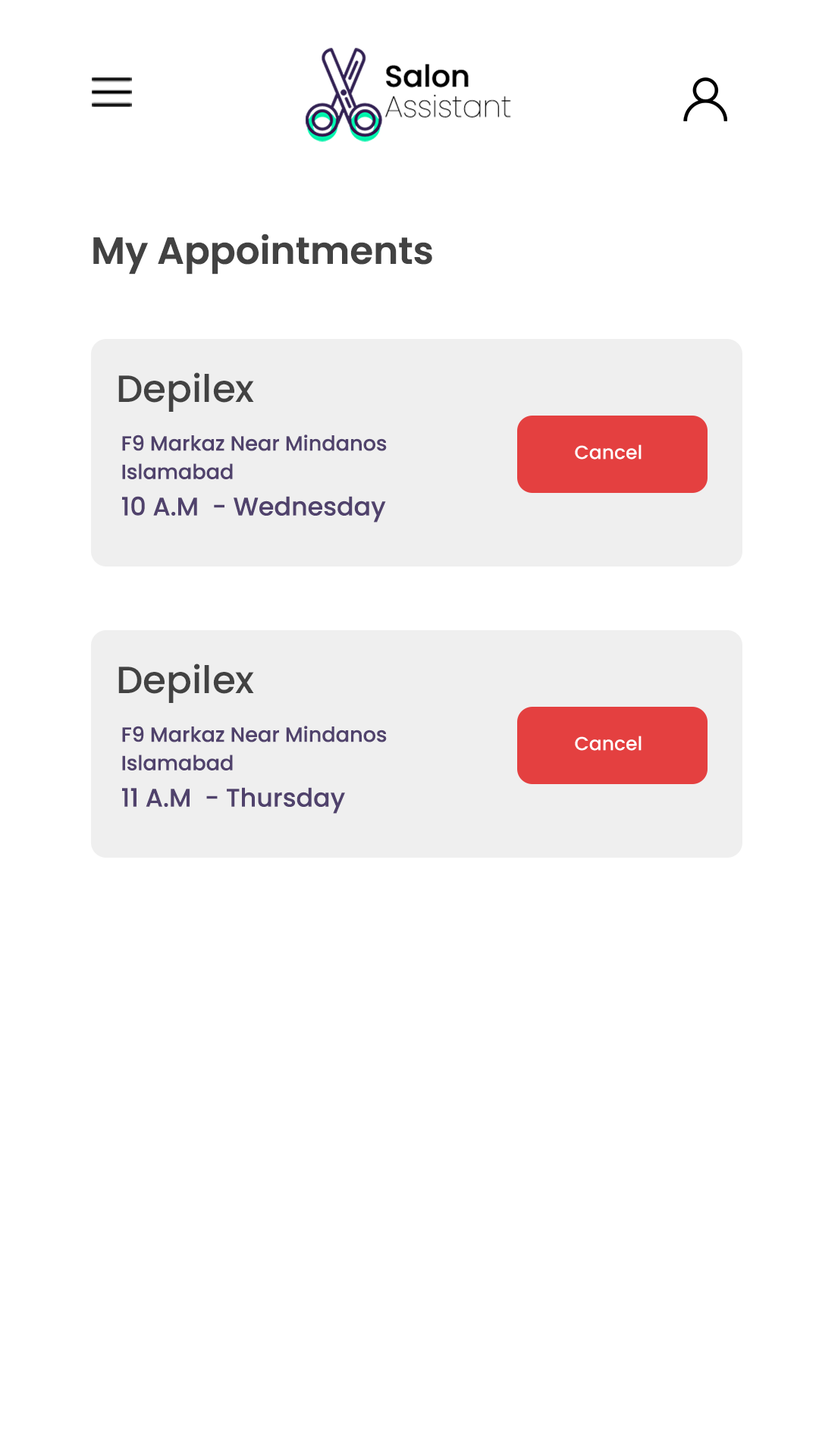
<style>
.page{position:relative;width:819px;height:1456px;background:#ffffff}
.page>*{position:absolute;margin:0}
.t1{font:37.9px "Poppins-SemiBold";color:#424242}
.t2{font:37.9px "Poppins-Medium";color:#424242}
.t3{font:20.5px/28.4px "Poppins-Medium";color:#50426c}
.t4{font:19px "Poppins-Medium";color:#ffffff}
.t5{font:25.3px "Poppins-Medium";color:#50426c}
</style>
<div class="page">
<p class="t1" style="left:93px;top:234px;width:339px;height:41px">My Appointments</p>
<p class="t2" style="left:118px;top:372px;width:136px;height:40px">Depilex</p>
<p class="t3" style="left:122px;top:435px;width:265px;height:44px">F9 Markaz Near Mindanos<br>Islamabad</p>
<p class="t4" style="left:575px;top:444px;width:67px;height:16px">Cancel</p>
<p class="t5" style="left:122px;top:496px;width:264px;height:26px">10 A.M  - Wednesday</p>
<p class="t2" style="left:118px;top:664px;width:136px;height:39px">Depilex</p>
<p class="t3" style="left:122px;top:726px;width:265px;height:44px">F9 Markaz Near Mindanos<br>Islamabad</p>
<p class="t4" style="left:575px;top:736px;width:67px;height:15px">Cancel</p>
<p class="t5" style="left:122px;top:787px;width:223px;height:27px">11 A.M  - Thursday</p>
</div>
